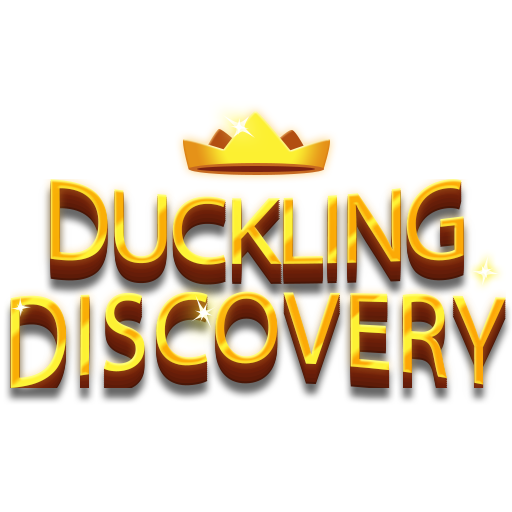
<style>
.page{position:relative;width:512px;height:512px;background:#ffffff}
.page>*{position:absolute;margin:0}
.t1{font:119.8px "MyriadPro-Regular";letter-spacing:-0.05em;scale:0.87 1}
.t2{font:136.9px "MyriadPro-Regular";letter-spacing:0.025em;scale:0.74 1}
</style>
<div class="page">
<p class="t1" style="left:50px;top:179px;width:414px;height:86px">DUCKLING</p>
<p class="t2" style="left:10px;top:291px;width:496px;height:97px">DISCOVERY</p>
</div>
